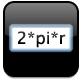
<style>
.page{position:relative;width:82px;height:82px;background:#000000}
.page>*{position:absolute;margin:0}
.t1{font:16.7px "LucidaGrande"}
</style>
<div class="page">
<p class="t1" style="left:18px;top:31px;width:48px;height:17px">2*pi*r</p>
</div>
